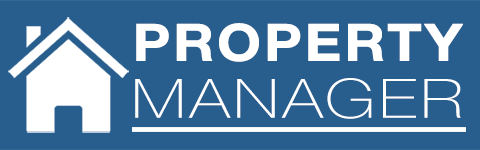
<style>
.page{position:relative;width:480px;height:150px;background:#285e8e}
.page>*{position:absolute;margin:0}
.t1{font:50.9px "HelveticaNeue-Bold";letter-spacing:0.025em;color:#ffffff;text-transform:uppercase;font-weight:bold;scale:1.11 1}
.t2{font:54.3px "HelveticaNeue-Thin";letter-spacing:0.05em;color:#ffffff;text-transform:uppercase;scale:1.25 1}
</style>
<div class="page">
<p class="t1" style="left:136px;top:23px;width:327px;height:39px">Property</p>
<p class="t2" style="left:135px;top:78px;width:326px;height:41px">manager</p>
</div>
